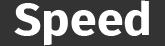
<style>
.page{position:relative;width:165px;height:46px;background:#333333}
.page>*{position:absolute;margin:0}
.t1{font:45.6px "FiraSans-Bold";color:#ffffff;scale:1.05 1}
</style>
<div class="page">
<p class="t1" style="left:14px;top:0px;width:135px;height:46px">Speed</p>
</div>
